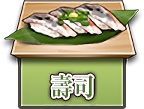
<style>
.page{position:relative;width:144px;height:109px}
.page>*{position:absolute;margin:0}
.t1{font:25px "RyuminPr6N-ExBold";color:#4c6f2a;scale:0.9 1}
</style>
<div class="page">
<p class="t1" style="left:52px;top:74px;width:41px;height:25px">壽司</p>
</div>
